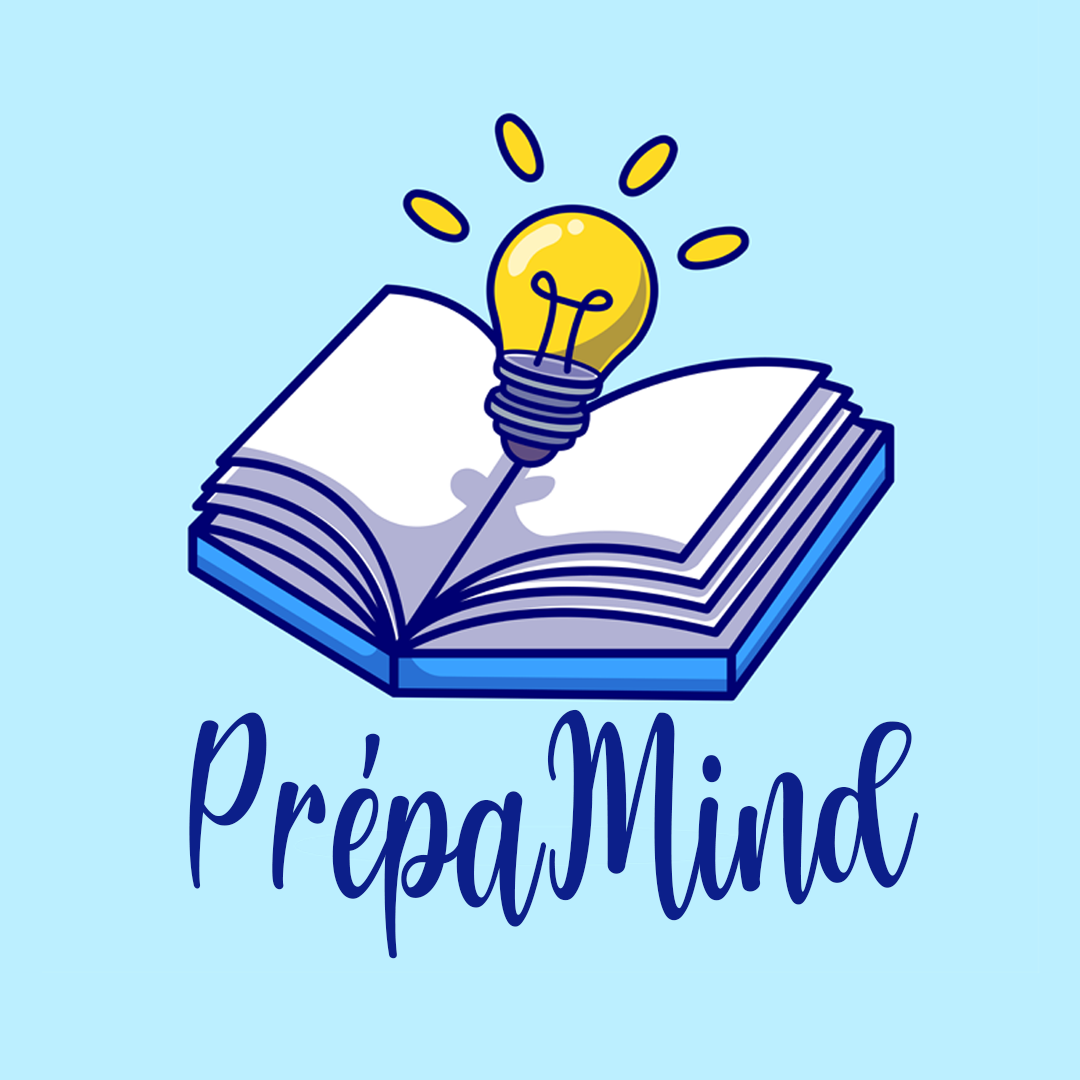
<style>
.page{position:relative;width:1080px;height:1080px;background:#bcefff}
.page>*{position:absolute;margin:0}
.t1{font:141.7px "HarmonyScript";color:#0c1f8a}
</style>
<div class="page">
<p class="t1" style="left:189px;top:709px;width:730px;height:250px;text-align:center">PrépaMind</p>
</div>
